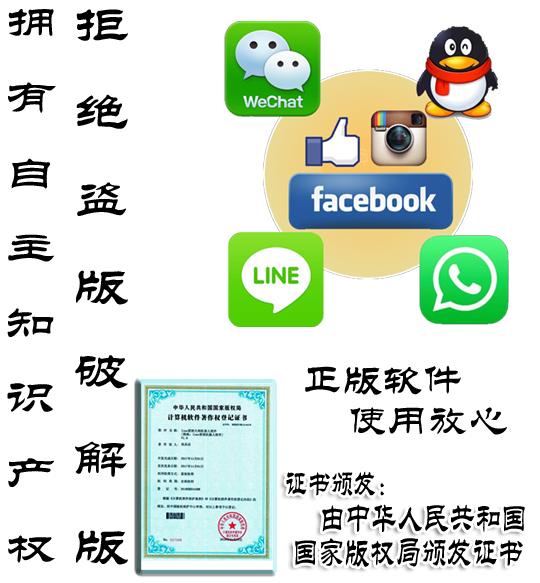
<style>
.page{position:relative;width:540px;height:583px;background:#ffffff}
.page>*{position:absolute;margin:0}
.t1{font:42.8px "STLiti";color:#000000;scale:1.23 1}
.t2{font:49.6px "STLiti";color:#000000;scale:1.16 1}
.t3{font:40.5px "STLiti";color:#000000}
.t4{font:34.6px "STLiti";color:#000000;scale:0.66 1}
.t5{font:39.3px "STLiti";color:#000000;scale:0.66 1}
.t6{font:38.8px "STLiti";color:#000000;scale:0.66 1}
</style>
<div class="page">
<p class="t1" style="left:7px;top:9px;width:49px;height:554px;text-align:center">拥<br>有<br>自<br>主<br>知<br>识<br>产<br>权</p>
<p class="t2" style="left:75px;top:9px;width:53px;height:556px;text-align:center">拒<br>绝<br>盗<br>版<br>破<br>解<br>版</p>
<p class="t3" style="left:305px;top:366px;width:156px;height:29px">正版软件</p>
<p class="t3" style="left:350px;top:407px;width:157px;height:28px">使用放心</p>
<p class="t4" style="left:286px;top:471px;width:98px;height:25px">证书颁发：</p>
<p class="t5" style="left:322px;top:504px;width:203px;height:29px">由中华人民共和国</p>
<p class="t6" style="left:295px;top:538px;width:228px;height:29px">国家版权局颁发证书</p>
</div>
